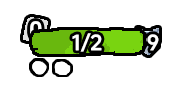
<style>
.page{position:relative;width:175px;height:89px;background:#ffffff}
.page>*{position:absolute;margin:0}
.t1{font:23.2px "DOUYINSANSBOLD-GB";text-transform:uppercase}
.t2{font:21.6px "DOUYINSANSBOLD-GB";color:#ffffff;text-transform:uppercase}
.t3{font:21.6px "DOUYINSANSBOLD-GB";text-transform:uppercase}
</style>
<div class="page">
<p class="t1" style="left:30px;top:21px;width:12px;height:18px">0</p>
<p class="t2" style="left:72px;top:33px;width:30px;height:19px">1/2</p>
<p class="t3" style="left:135px;top:34px;width:24px;height:17px">99</p>
</div>
